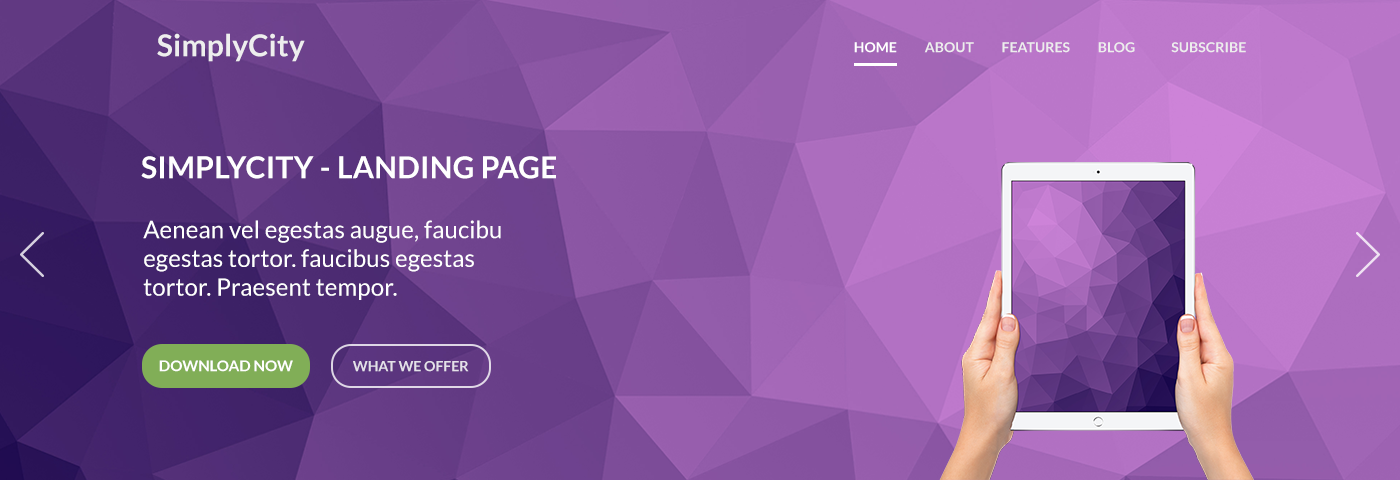
<style>
.page{position:relative;width:1400px;height:480px}
.page>*{position:absolute;margin:0}
.t1{font:30px "Lato-Bold";letter-spacing:0.005em;color:#eeeeee}
.t2{font:14px "Lato-Bold";letter-spacing:0.005em;color:#ededed}
.t3{font:14px "Lato-Bold";letter-spacing:0.005em;color:#ffffff}
.t4{font:30px "Lato-Bold";letter-spacing:0.01em;color:#ffffff}
.t5{font:24px "Lato-Regular";letter-spacing:0.005em;color:#ffffff}
.t6{font:15px "Lato-Bold";color:#ffffff}
.t7{font:14px "Lato-Bold";color:#e4e1e9}
</style>
<div class="page">
<p class="t1" style="left:157px;top:33px;width:148px;height:29px">SimplyCity</p>
<p class="t2" style="left:854px;top:42px;width:392px;height:11px"><span class="t3">HOME</span>          ABOUT          FEATURES          BLOG             SUBSCRIBE</p>
<p class="t4" style="left:141px;top:156px;width:415px;height:23px">SIMPLYCITY - LANDING PAGE</p>
<p class="t5" style="left:143px;top:220px;width:358px;height:80px">Aenean vel egestas augue, faucibu<br>egestas tortor. faucibus egestas<br>tortor. Praesent tempor.</p>
<p class="t6" style="left:159px;top:360px;width:134px;height:12px">DOWNLOAD NOW</p>
<p class="t7" style="left:353px;top:361px;width:116px;height:11px">WHAT WE OFFER</p>
</div>
